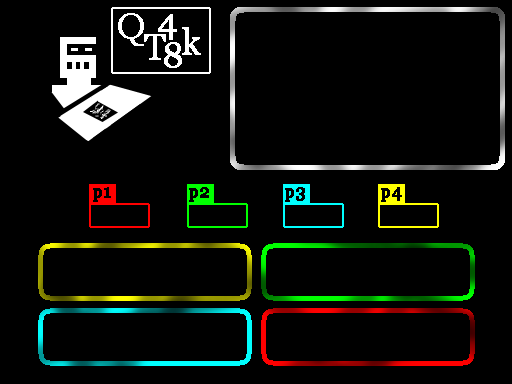
<style>
.page{position:relative;width:512px;height:384px;background:#000000}
.page>*{position:absolute;margin:0}
.t1{font:18px "Georgia";color:#000000;font-weight:bold}
</style>
<div class="page">
<p class="t1" style="left:93px;top:187px;width:18px;height:15px">p1</p>
<p class="t1" style="left:189px;top:187px;width:20px;height:15px">p2</p>
<p class="t1" style="left:285px;top:187px;width:20px;height:15px">p3</p>
<p class="t1" style="left:381px;top:187px;width:21px;height:15px">p4</p>
</div>
